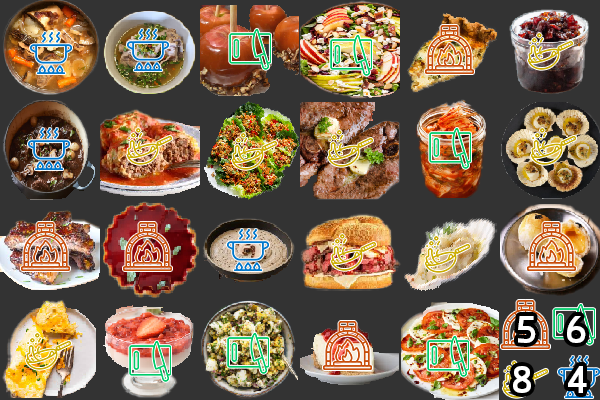
<style>
.page{position:relative;width:600px;height:400px;background:#333333}
.page>*{position:absolute;margin:0}
.t1{font:48px "PrintAble4UBold";color:#ffffff}
</style>
<div class="page">
<p class="t1" style="left:518px;top:316px;width:18px;height:27px">5</p>
<p class="t1" style="left:567px;top:316px;width:19px;height:27px">6</p>
<p class="t1" style="left:513px;top:366px;width:18px;height:27px">8</p>
<p class="t1" style="left:568px;top:366px;width:19px;height:27px">4</p>
</div>
